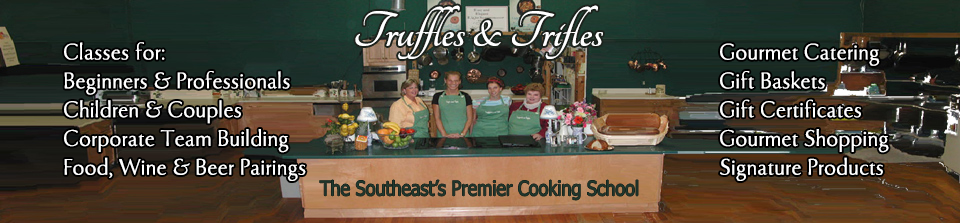
<style>
.page{position:relative;width:960px;height:223px}
.page>*{position:absolute;margin:0}
.t1{font:54px "Tangerine-Bold";color:#ffffff}
.t2{font:24px "Tenderness";color:#ffffff}
.t3{font:20.4px "Tahoma";color:#203a2f;scale:0.88 1}
</style>
<div class="page">
<p class="t1" style="left:355px;top:5px;width:248px;height:54px">Truffles &amp; Trifles</p>
<p class="t2" style="left:64px;top:42px;width:242px;height:139px">Classes for:<br>Beginners &amp; Professionals<br>Children &amp; Couples<br>Corporate Team Building<br>Food, Wine &amp; Beer Pairings</p>
<p class="t2" style="left:720px;top:43px;width:169px;height:138px">Gourmet Catering<br>Gift Baskets<br>Gift Certificates<br>Gourmet Shopping<br>Signature Products</p>
<p class="t3" style="left:319px;top:180px;width:319px;height:20px">The Southeast’s Premier Cooking School</p>
</div>
